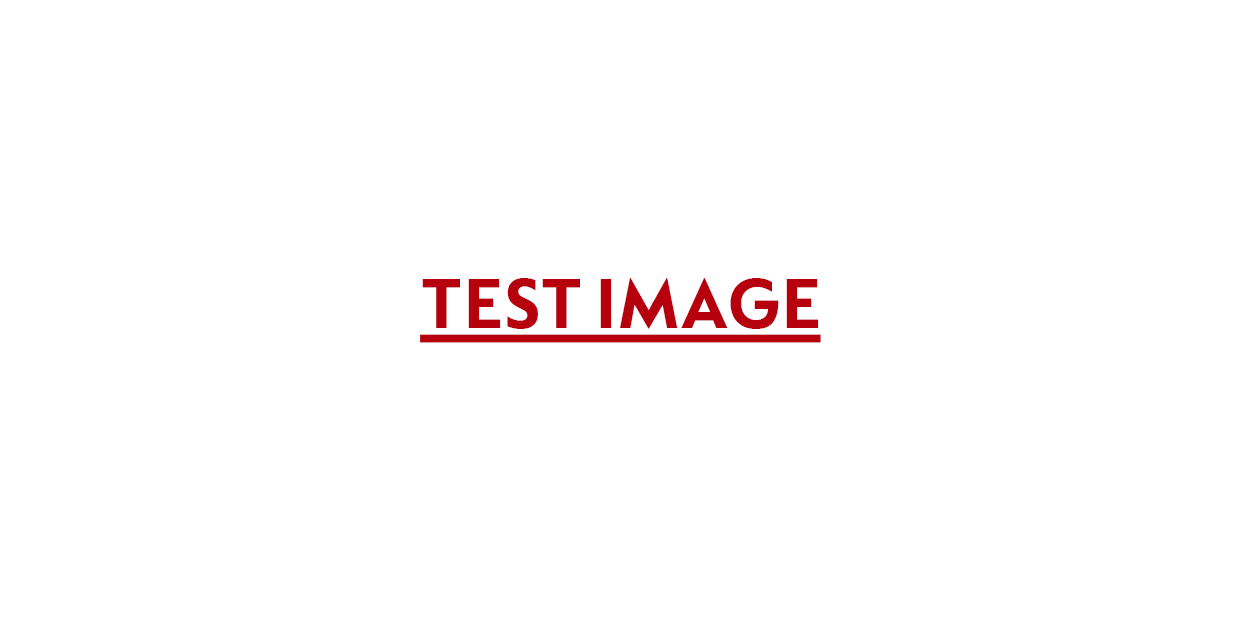
<style>
.page{position:relative;width:1240px;height:620px;background:#ffffff}
.page>*{position:absolute;margin:0}
.t1{font:76px "NespressoLucas-Bold";color:#b6000d;text-decoration:underline}
</style>
<div class="page">
<p class="t1" style="left:420px;top:278px;width:401px;height:65px">TEST IMAGE</p>
</div>
